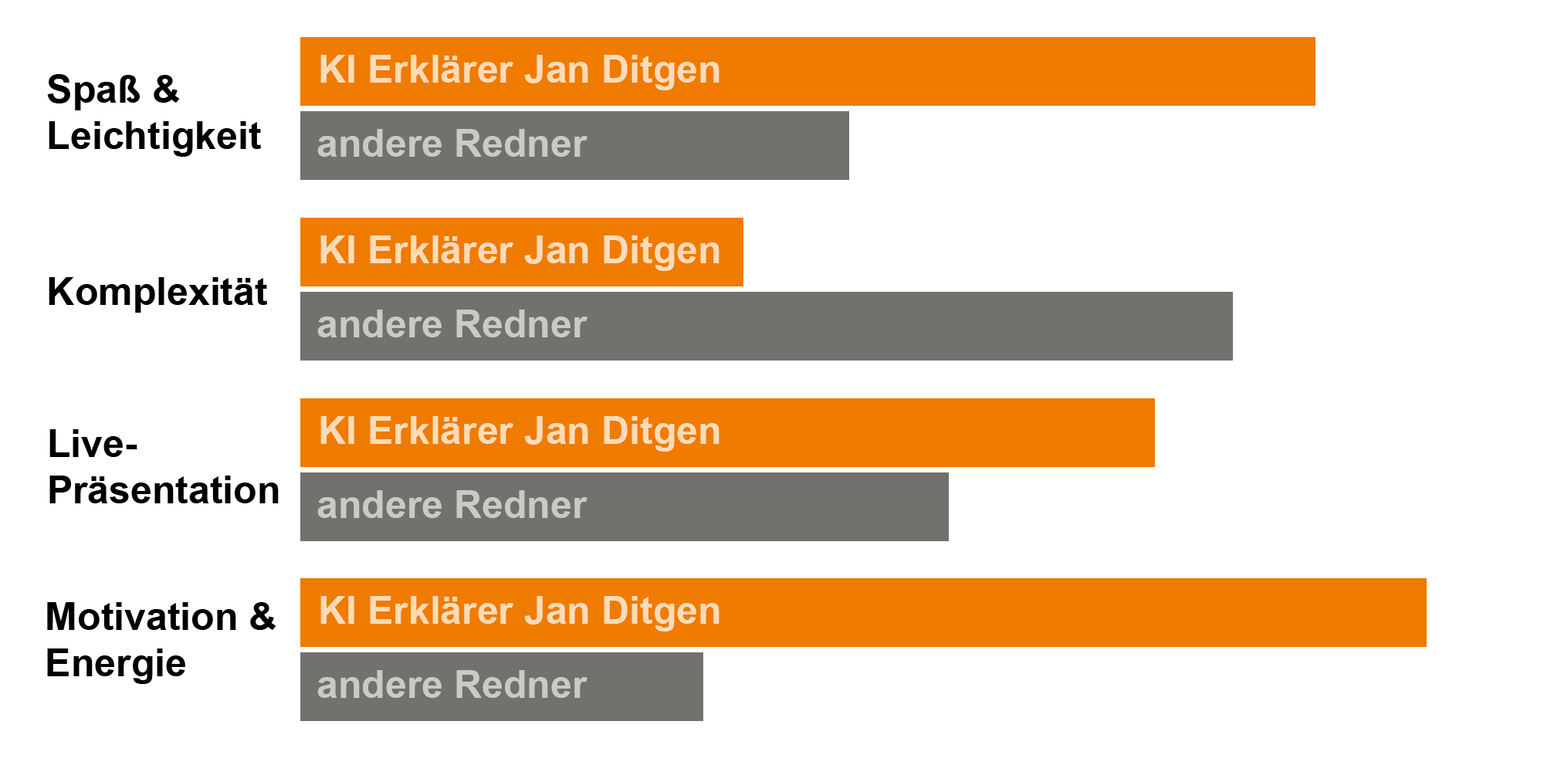
<style>
.page{position:relative;width:1544px;height:772px;background:#ffffff}
.page>*{position:absolute;margin:0}
.t1{font:38.6px "Arial-BoldMT";color:#fddbb8}
.t2{font:38.6px "Arial-BoldMT";color:#000000}
.t3{font:38.6px "Arial-BoldMT";color:#cac9c8}
</style>
<div class="page">
<p class="t1" style="left:320px;top:55px;width:400px;height:35px">KI Erklärer Jan Ditgen</p>
<p class="t2" style="left:47px;top:74px;width:214px;height:83px">Spaß &amp;<br>Leichtigkeit</p>
<p class="t3" style="left:317px;top:129px;width:271px;height:28px">andere Redner</p>
<p class="t1" style="left:320px;top:236px;width:400px;height:35px">KI Erklärer Jan Ditgen</p>
<p class="t2" style="left:49px;top:277px;width:218px;height:36px">Komplexität</p>
<p class="t3" style="left:317px;top:310px;width:271px;height:27px">andere Redner</p>
<p class="t1" style="left:320px;top:416px;width:400px;height:36px">KI Erklärer Jan Ditgen</p>
<p class="t2" style="left:49px;top:429px;width:230px;height:74px">Live-<br>Präsentation</p>
<p class="t3" style="left:317px;top:490px;width:271px;height:28px">andere Redner</p>
<p class="t2" style="left:47px;top:602px;width:229px;height:82px">Motivation &amp;<br>Energie</p>
<p class="t1" style="left:320px;top:596px;width:400px;height:36px">KI Erklärer Jan Ditgen</p>
<p class="t3" style="left:317px;top:670px;width:271px;height:28px">andere Redner</p>
</div>
